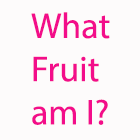
<style>
.page{position:relative;width:140px;height:140px;background:#fdfbfb}
.page>*{position:absolute;margin:0}
.t1{font:36px "MyriadPro-Regular";color:#f30d8a}
</style>
<div class="page">
<p class="t1" style="left:31px;top:12px;width:79px;height:113px">What<br>Fruit <br>am I?</p>
</div>
